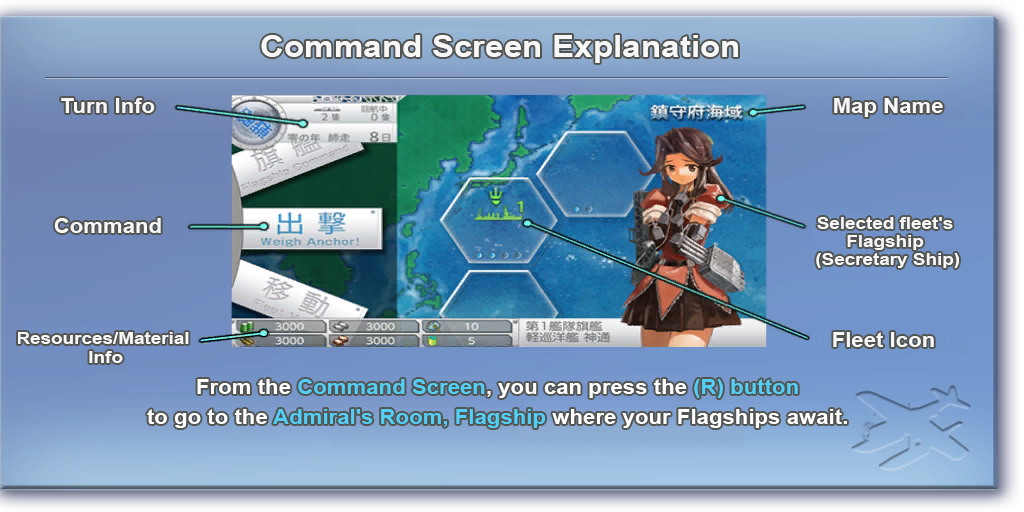
<style>
.page{position:relative;width:1024px;height:512px}
.page>*{position:absolute;margin:0}
.t1{font:30px "Arial-BoldMT";color:#f7f7f7;scale:1.11 1}
.t2{font:20px "Arial-BoldMT";color:#f7f7f7;scale:1.11 1}
.t3{font:17px/18px "Arial-BoldMT";color:#f7f7f7;scale:1.11 1}
.t4{font:17px/19px "Arial-BoldMT";color:#f7f7f7;scale:1.11 1}
.t5{font:20px/30px "Arial-BoldMT";color:#ffffff;scale:1.11 1}
.t6{font:20px/30px "Arial-BoldMT";color:#52cff7;scale:1.11 1}
</style>
<div class="page">
<p class="t1" style="left:261px;top:35px;width:477px;height:28px">Command Screen Explanation</p>
<p class="t2" style="left:61px;top:98px;width:94px;height:15px">Turn Info</p>
<p class="t2" style="left:834px;top:98px;width:109px;height:19px">Map Name</p>
<p class="t2" style="left:54px;top:218px;width:107px;height:15px">Command</p>
<p class="t3" style="left:816px;top:217px;width:143px;height:51px;text-align:center">Selected fleet's <br>Flagship <br>(Secretary Ship)</p>
<p class="t4" style="left:18px;top:332px;width:171px;height:31px;text-align:center">Resources/Material <br>Info</p>
<p class="t2" style="left:833px;top:332px;width:101px;height:15px">Fleet Icon</p>
<p class="t5" style="left:147px;top:379px;width:700px;height:49px;text-align:center">From the <span class="t6">Command Screen</span>, you can press the <span class="t6">(R) button<br></span>to go to the <span class="t6">Admiral's Room, Flagship</span> where your Flagships await.</p>
</div>
